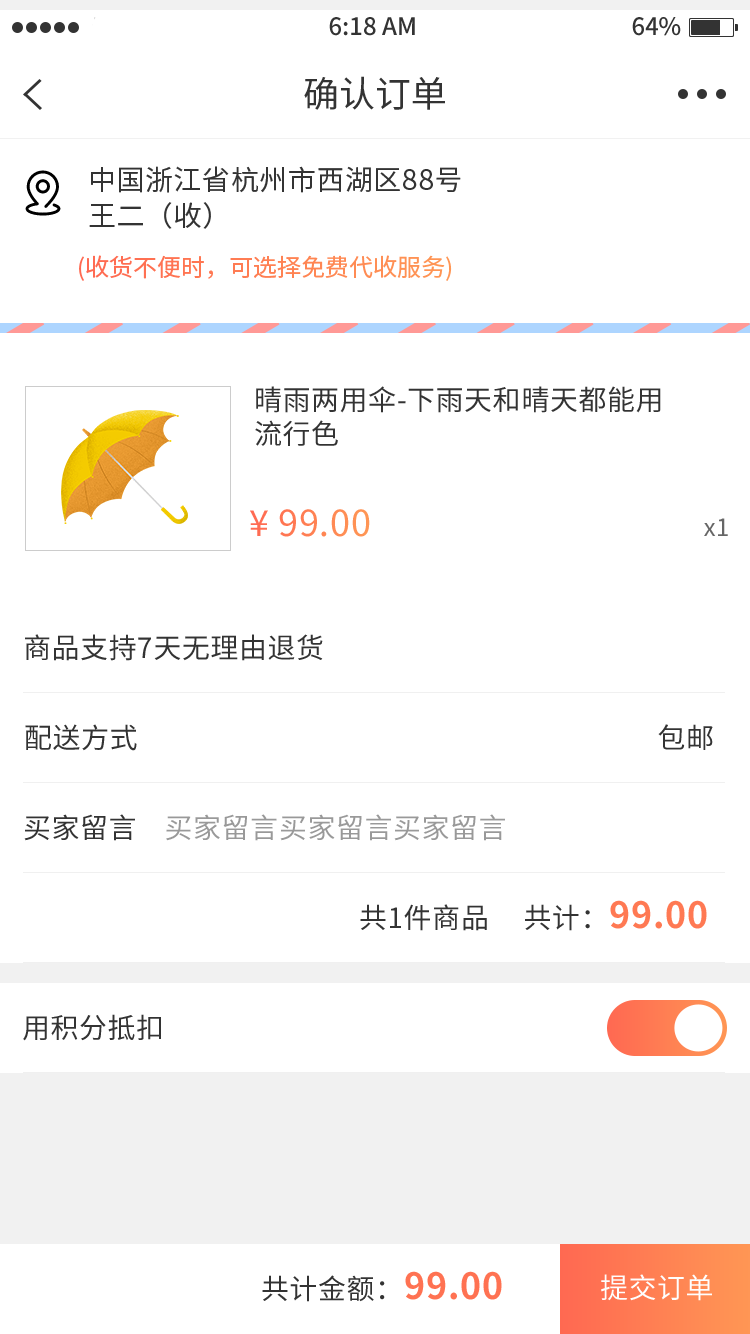
<style>
.page{position:relative;width:750px;height:1334px;background:#ffffff}
.page>*{position:absolute;margin:0}
.t1{font:36px "NotoSansHans-Regular";color:#333333}
.t2{font:28px/36px "NotoSansHans-Regular";letter-spacing:0.02em;color:#333333}
.t3{font:24px "NotoSansHans-Regular";color:#ff8053}
.t4{font:28px "NotoSansHans-Regular";letter-spacing:0.02em;color:#333333}
.t5{font:35.8px "NotoSansHans-Regular";letter-spacing:0.02em;color:#ff8253}
.t6{font:24px "NotoSansHans-Regular";letter-spacing:0.02em;color:#666666}
.t7{font:28px "NotoSansHans-Regular";letter-spacing:0.02em;color:#999999}
.t8{font:36px "NotoSansHans-Bold";letter-spacing:0.02em;color:#ff7953}
.t9{font:36px "NotoSansHans-Bold";letter-spacing:0.02em;color:#ff7252}
.t10{font:28px "NotoSansHans-Regular";letter-spacing:0.02em;color:#fefefe}
</style>
<div class="page">
<p class="t1" style="left:304px;top:76px;width:141px;height:34px">确认订单</p>
<p class="t2" style="left:89px;top:166px;width:372px;height:63px">中国浙江省杭州市西湖区88号<br>王二（收）</p>
<p class="t3" style="left:79px;top:255px;width:373px;height:26px">(收货不便时，可选择免费代收服务)</p>
<p class="t4" style="left:255px;top:386px;width:406px;height:60px;text-align:justify">晴雨两用伞-下雨天和晴天都能用<br>流行色</p>
<p class="t5" style="left:250px;top:509px;width:120px;height:28px">¥ 99.00</p>
<p class="t6" style="left:704px;top:518px;width:24px;height:18px">x1</p>
<p class="t4" style="left:25px;top:634px;width:298px;height:27px">商品支持7天无理由退货</p>
<p class="t4" style="left:25px;top:724px;width:688px;height:27px">配送方式                                                                            包邮</p>
<p class="t7" style="left:24px;top:814px;width:481px;height:27px"><span class="t4">买家留言    </span>买家留言买家留言买家留言</p>
<p class="t4" style="left:360px;top:900px;width:347px;height:31px">共1件商品     共计：<span class="t8">99.00</span></p>
<p class="t4" style="left:23px;top:1014px;width:138px;height:27px">用积分抵扣</p>
<p class="t4" style="left:262px;top:1271px;width:240px;height:31px">共计金额：<span class="t9">99.00</span></p>
<p class="t10" style="left:601px;top:1274px;width:111px;height:27px">提交订单</p>
</div>
